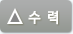
<style>
.page{position:relative;width:73px;height:34px}
.page>*{position:absolute;margin:0}
.t1{font:14px "NanumBarunGothic";color:#ffffff;font-weight:bold;scale:0.95 1}
</style>
<div class="page">
<p class="t1" style="left:28px;top:10px;width:30px;height:15px">수  력</p>
</div>
